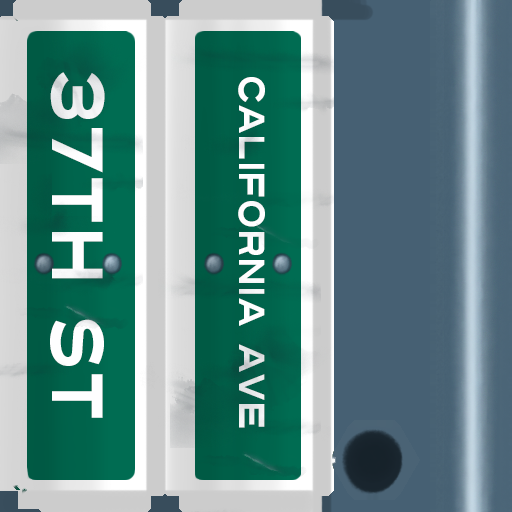
<style>
.page{position:relative;width:512px;height:512px}
.page>*{position:absolute;margin:0}
.t1{font:72px "Turnpike";color:#fefeff;scale:0.75 1}
.t2{font:36px "Turnpike";color:#fefeff;scale:0.75 1}
</style>
<div class="page">
<p class="t1" style="left:50px;top:72px;width:55px;height:346px;rotate:90deg">37th st</p>
<p class="t2" style="left:238px;top:77px;width:27px;height:351px;rotate:90deg">california ave</p>
</div>
